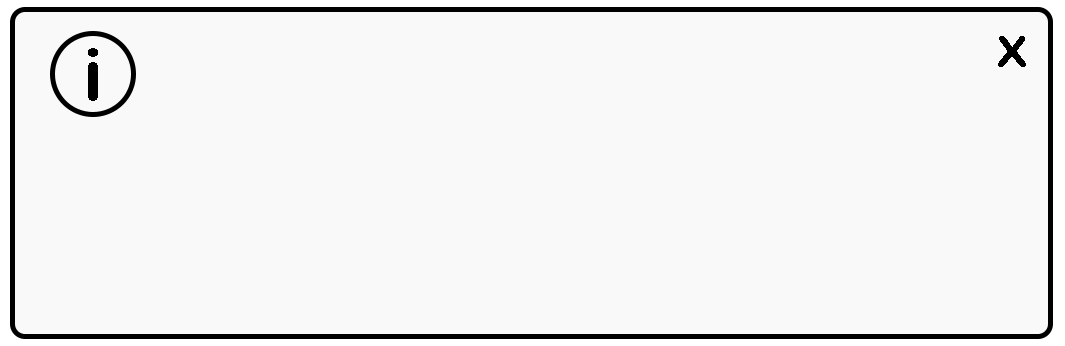
<style>
.page{position:relative;width:1065px;height:346px;background:#f9f9f9}
.page>*{position:absolute;margin:0}
.t1{font:43.4px "ArialRoundedMTBold";color:#000000;scale:1.19 1}
.t2{font:72px "ArialRoundedMTBold";color:#000000}
</style>
<div class="page">
<p class="t1" style="left:998px;top:36px;width:28px;height:31px">X</p>
<p class="t2" style="left:88px;top:48px;width:10px;height:53px">i</p>
</div>
